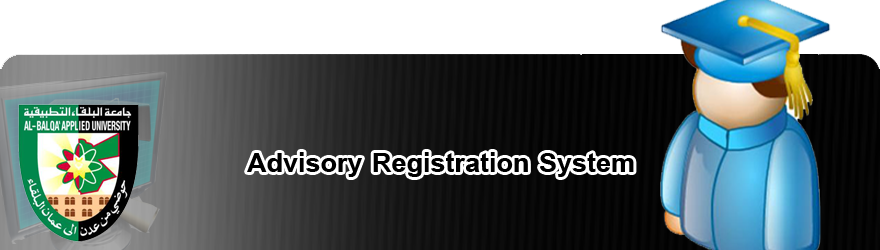
<style>
.page{position:relative;width:880px;height:250px;background:#ffffff}
.page>*{position:absolute;margin:0}
.t1{font:30px "ArabicTransparent-Bold";color:#000000}
</style>
<div class="page">
<p class="t1" style="left:247px;top:152px;width:387px;height:25px">Advisory Registration System</p>
</div>
